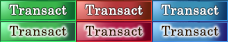
<style>
.page{position:relative;width:228px;height:42px}
.page>*{position:absolute;margin:0}
.t1{font:13.3px "CenturySchoolbook";letter-spacing:0.025em;color:#ffffff}
.t2{font:13.3px "CenturySchoolbook";letter-spacing:0.025em;color:#321a02}
</style>
<div class="page">
<p class="t1" style="left:9px;top:4px;width:58px;height:11px">Transact</p>
<p class="t1" style="left:85px;top:4px;width:58px;height:11px">Transact</p>
<p class="t1" style="left:161px;top:4px;width:58px;height:11px">Transact</p>
<p class="t2" style="left:9px;top:25px;width:58px;height:11px">Transact</p>
<p class="t2" style="left:85px;top:25px;width:58px;height:11px">Transact</p>
<p class="t2" style="left:161px;top:25px;width:58px;height:11px">Transact</p>
</div>
